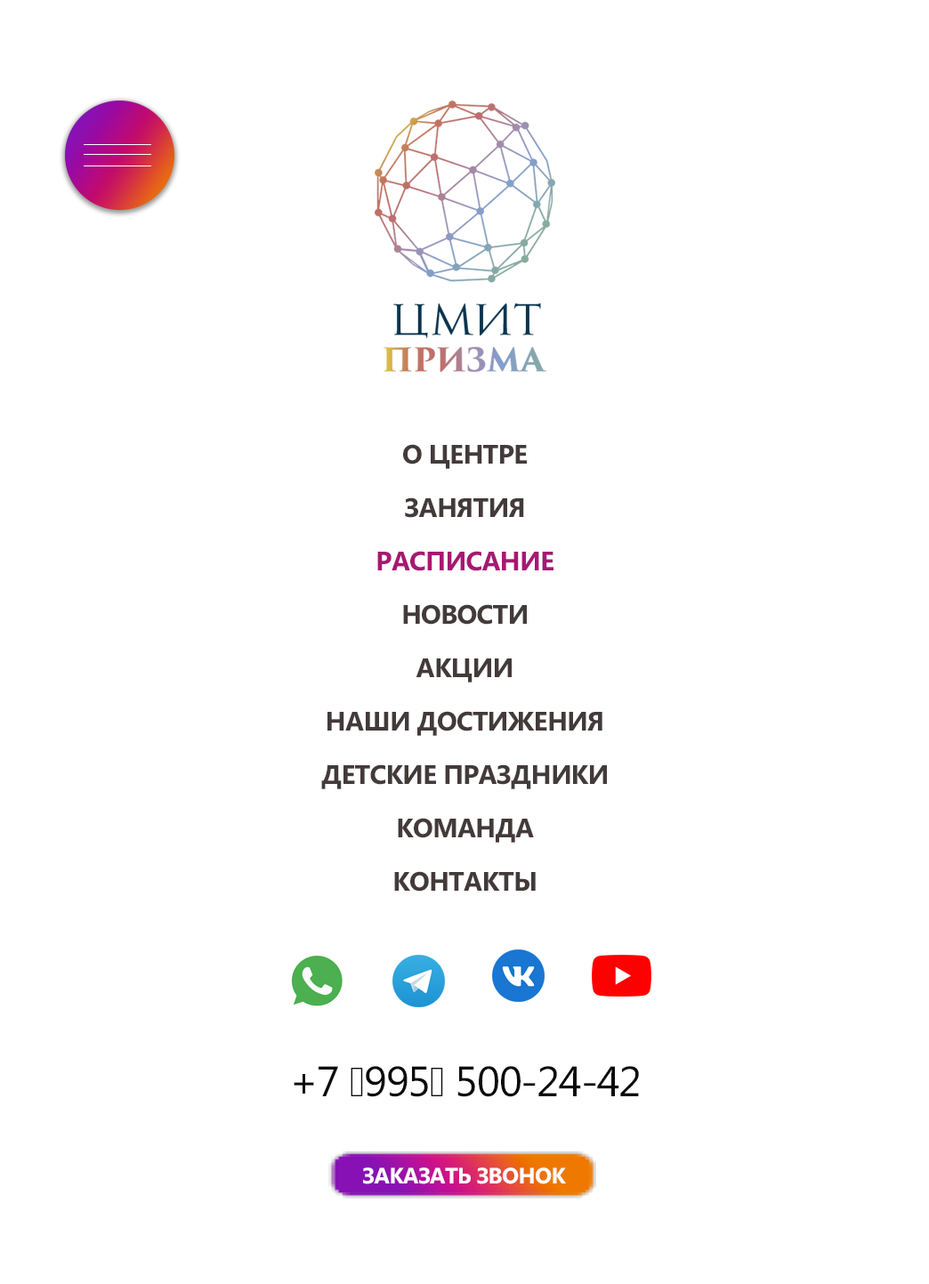
<style>
.page{position:relative;width:929px;height:1284px;background:#ffffff}
.page>*{position:absolute;margin:0}
.t1{font:26.7px/53.4px "SegoeUI-Bold";letter-spacing:-0.025em;color:#433a3a;text-transform:uppercase}
.t2{font:26.7px/53.4px "SegoeUI-Bold";letter-spacing:-0.025em;color:#a71873;text-transform:uppercase}
.t3{font:42.7px "SegoeUI";letter-spacing:-0.025em;color:#0b0a0a;text-transform:uppercase}
.t4{font:22.2px "SegoeUI-Bold";letter-spacing:-0.025em;color:#fffefe}
</style>
<div class="page">
<p class="t1" style="left:321px;top:444px;width:286px;height:447px;text-align:center">О ЦЕНТРЕ<br>ЗАНЯТИЯ<br><span class="t2">РАСПИСАНИЕ<br></span>НОВОСТИ<br>АКЦИИ<br>НАШИ достижения<br>ДЕТСКИЕ ПРАЗДНИКИ<br>КОМАНДА<br>КОНТАКТЫ</p>
<p class="t3" style="left:294px;top:1066px;width:345px;height:31px">+7 (995) 500-24-42</p>
<p class="t4" style="left:363px;top:1167px;width:203px;height:17px">ЗАКАЗАТЬ ЗВОНОК</p>
</div>
